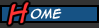
<style>
.page{position:relative;width:99px;height:28px;background:#165284}
.page>*{position:absolute;margin:0}
.t1{font:10.3px "AnimeAce2.0BB-Bold";color:#ffffff}
</style>
<div class="page">
<p class="t1" style="left:30px;top:8px;width:32px;height:11px">ome</p>
</div>
